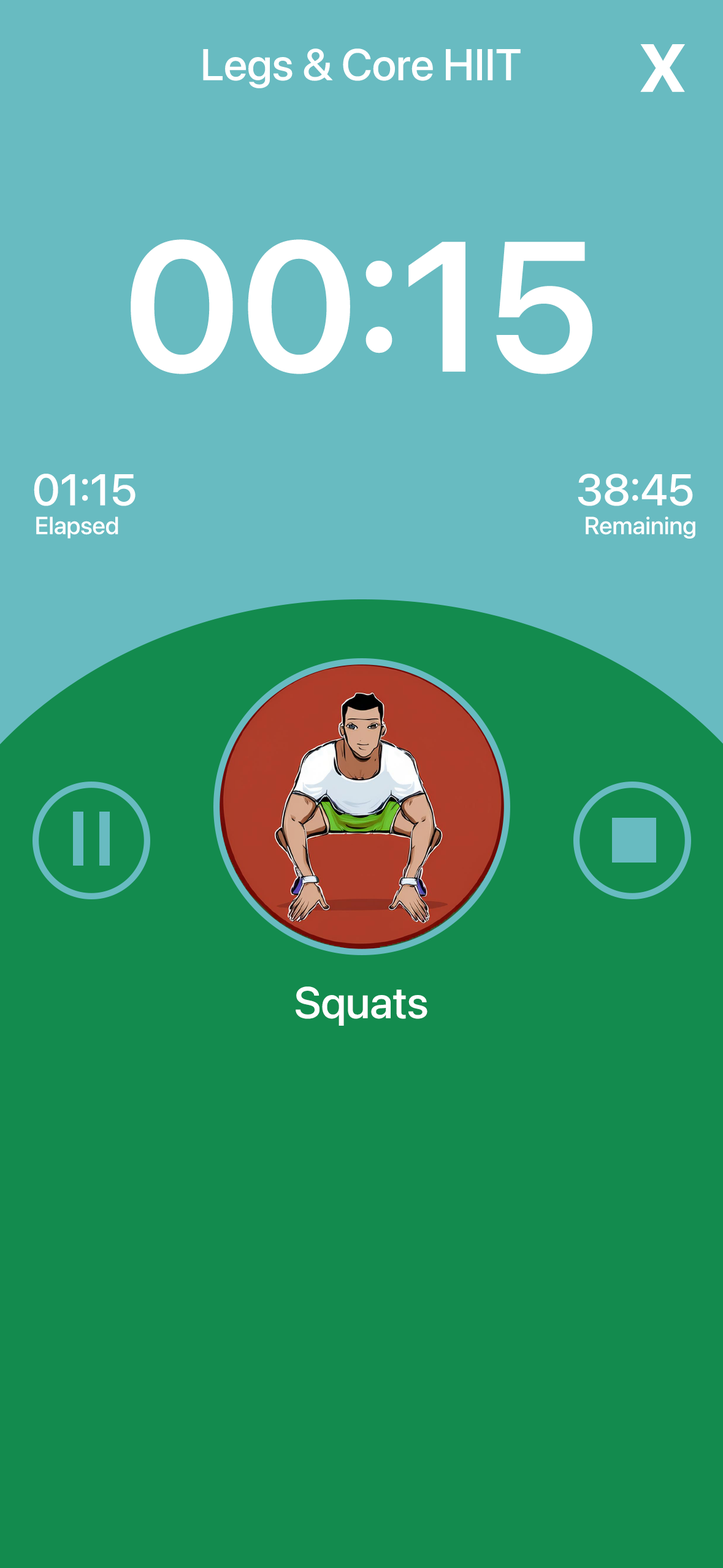
<style>
.page{position:relative;width:723px;height:1568px;background:#138b4e}
.page>*{position:absolute;margin:0}
.t1{font:44.2px "SFPro-Medium";color:#ffffff}
.t2{font:92px "SFPro-Semibold";color:#ffffff}
.t3{font:184px "SFPro-Semibold";color:#ffffff}
.t4{font:24.5px "SFPro-Medium";color:#ffffff}
</style>
<div class="page">
<p class="t1" style="left:203px;top:48px;width:318px;height:40px">Legs &amp; Core HIIT</p>
<p class="t2" style="left:640px;top:44px;width:45px;height:48px">x</p>
<p class="t3" style="left:131px;top:239px;width:462px;height:135px">00:15</p>
<p class="t1" style="left:34px;top:474px;width:102px;height:32px">01:15</p>
<p class="t1" style="left:578px;top:474px;width:115px;height:32px">38:45</p>
<p class="t4" style="left:36px;top:517px;width:82px;height:22px">Elapsed</p>
<p class="t4" style="left:586px;top:517px;width:110px;height:22px">Remaining</p>
<p class="t1" style="left:296px;top:986px;width:132px;height:40px">Squats</p>
</div>
